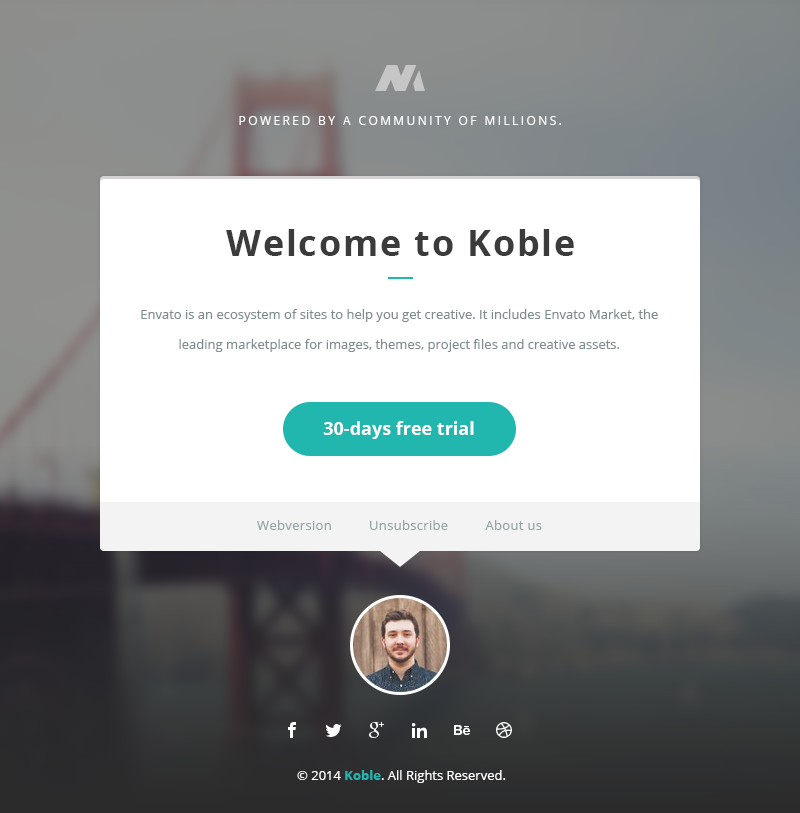
<style>
.page{position:relative;width:800px;height:813px;background:#ffffff}
.page>*{position:absolute;margin:0}
.t1{font:12px "OpenSans";letter-spacing:0.2em;color:#ffffff}
.t2{font:36px "OpenSans-Bold";letter-spacing:0.05em;color:#3b3b3b}
.t3{font:13px/30px "OpenSans";color:#7f8c8d}
.t4{font:18px "OpenSans-Bold";color:#ffffff}
.t5{font:13px "OpenSans";letter-spacing:0.025em;color:#95a5a6}
.t6{font:13px "OpenSans";color:#ffffff}
.t7{font:13px "OpenSans-Bold";color:#21b6ae}
</style>
<div class="page">
<p class="t1" style="left:239px;top:116px;width:322px;height:9px">POWERED BY A COMMUNITY OF MILLIONS.</p>
<p class="t2" style="left:226px;top:229px;width:348px;height:27px">Welcome to Koble</p>
<p class="t3" style="left:141px;top:309px;width:517px;height:43px;text-align:center">Envato is an ecosystem of sites to help you get creative. It includes Envato Market, the leading marketplace for images, themes, project files and creative assets.</p>
<p class="t4" style="left:323px;top:421px;width:151px;height:18px">30-days free trial</p>
<p class="t5" style="left:257px;top:520px;width:285px;height:10px">Webversion          Unsubscribe          About us</p>
<p class="t6" style="left:297px;top:770px;width:209px;height:13px">© 2014 <span class="t7">Koble</span>. All Rights Reserved.</p>
</div>
